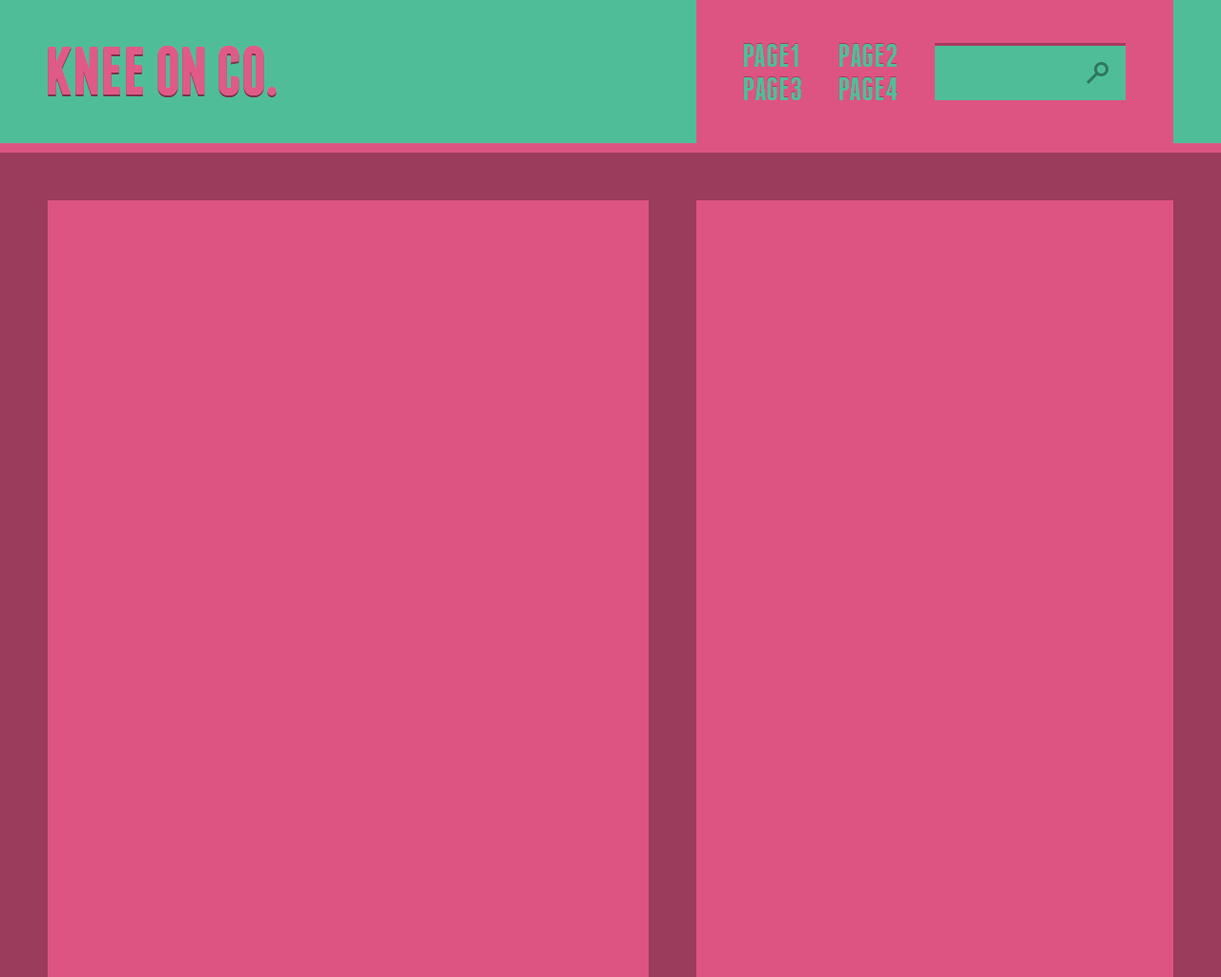
<style>
.page{position:relative;width:1221px;height:977px;background:#dd5483}
.page>*{position:absolute;margin:0}
.t1{font:68.7px "Franchise-Bold";color:#e05a88}
.t2{font:34.3px "Franchise-Bold";color:#4fbe98}
</style>
<div class="page">
<p class="t1" style="left:48px;top:46px;width:229px;height:49px">KNEE ON CO.</p>
<p class="t2" style="left:743px;top:43px;width:55px;height:24px">PAGE1</p>
<p class="t2" style="left:838px;top:43px;width:59px;height:24px">PAGE2</p>
<p class="t2" style="left:743px;top:76px;width:58px;height:24px">PAGE3</p>
<p class="t2" style="left:838px;top:76px;width:60px;height:24px">PAGE4</p>
</div>
